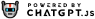
<style>
.page{position:relative;width:95px;height:19px;background:#ffffff}
.page>*{position:absolute;margin:0}
.t1{font:5.2px "BabaPro-Bold";letter-spacing:-0.02em}
.t2{font:9.4px "BabaPro-Bold";letter-spacing:-0.02em;color:#000000}
.t3{font:7.4px "BabaPro-Bold";letter-spacing:-0.02em;color:#000000}
</style>
<div class="page">
<p class="t1" style="left:28px;top:3px;width:53px;height:5px">p o w e r e d   b y</p>
<p class="t2" style="left:27px;top:9px;width:55px;height:8px">CHATGPT</p>
<p class="t3" style="left:81px;top:10px;width:13px;height:7px">.js</p>
</div>
